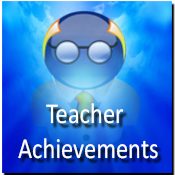
<style>
.page{position:relative;width:175px;height:175px}
.page>*{position:absolute;margin:0}
.t1{font:29px "Calibri";color:#ffffff;scale:0.85 1}
</style>
<div class="page">
<p class="t1" style="left:18px;top:103px;width:140px;height:56px">Teacher<br>Achievements</p>
</div>
